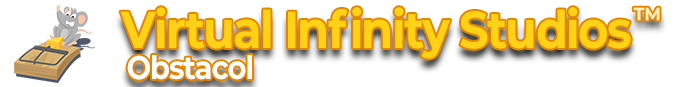
<style>
.page{position:relative;width:700px;height:87px;background:#ffffff}
.page>*{position:absolute;margin:0}
.t1{font:51.8px "Montserrat-Bold";letter-spacing:-0.04em;color:#ffd117;scale:0.9 1}
.t2{font:30.4px "Montserrat-Bold";letter-spacing:-0.04em;color:#fff1b9;scale:0.89 1}
.t3{font:32.4px "Montserrat-Bold";letter-spacing:-0.04em;color:#ffffff;scale:0.9 1}
</style>
<div class="page">
<p class="t1" style="left:120px;top:7px;width:511px;height:52px">Virtual Infinity Studios</p>
<p class="t2" style="left:633px;top:7px;width:27px;height:14px">™</p>
<p class="t3" style="left:127px;top:55px;width:125px;height:25px">Obstacol</p>
</div>
